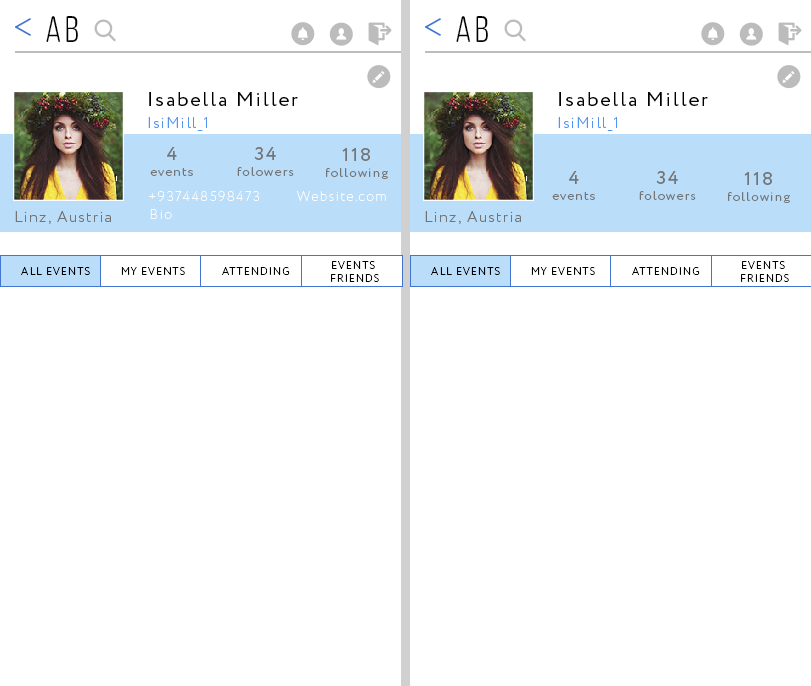
<style>
.page{position:relative;width:811px;height:686px;background:#ffffff}
.page>*{position:absolute;margin:0}
.t1{font:37px "ClutchSans-Regular";letter-spacing:0.1em;color:#000000}
.t2{font:20px "Circe-Regular";letter-spacing:0.1em;color:#000000}
.t3{font:15px "Circe-Light";letter-spacing:0.1em;color:#5495f2}
.t4{font:13px "Circe-Light";letter-spacing:0.1em;color:#747474}
.t5{font:18.6px "Circe-Regular";letter-spacing:0.1em;color:#747474}
.t6{font:13.7px "Circe-ExtraLight";letter-spacing:0.1em;color:#fefefe}
.t7{font:15px "Circe-Light";letter-spacing:0.1em;color:#747474}
.t8{font:10.3px "Circe-Light";letter-spacing:0.1em;color:#000000}
</style>
<div class="page">
<p class="t1" style="left:46px;top:16px;width:32px;height:26px">Ab</p>
<p class="t1" style="left:456px;top:16px;width:32px;height:26px">Ab</p>
<p class="t2" style="left:149px;top:92px;width:149px;height:14px">Isabella Miller</p>
<p class="t2" style="left:559px;top:92px;width:149px;height:14px">Isabella Miller</p>
<p class="t3" style="left:148px;top:117px;width:59px;height:14px">IsiMill_1</p>
<p class="t3" style="left:558px;top:117px;width:59px;height:14px">IsiMill_1</p>
<p class="t4" style="left:150px;top:147px;width:43px;height:29px;text-align:center"><span class="t5">4<br></span>events</p>
<p class="t4" style="left:237px;top:147px;width:57px;height:29px;text-align:center"><span class="t5">34<br></span>folowers</p>
<p class="t4" style="left:326px;top:148px;width:62px;height:31px;text-align:center"><span class="t5">118<br></span>following</p>
<p class="t4" style="left:552px;top:171px;width:43px;height:29px;text-align:center"><span class="t5">4<br></span>events</p>
<p class="t4" style="left:639px;top:171px;width:57px;height:29px;text-align:center"><span class="t5">34<br></span>folowers</p>
<p class="t4" style="left:728px;top:172px;width:62px;height:31px;text-align:center"><span class="t5">118<br></span>following</p>
<p class="t6" style="left:149px;top:191px;width:111px;height:10px">+937448598473</p>
<p class="t6" style="left:297px;top:191px;width:89px;height:10px">Website.com</p>
<p class="t6" style="left:150px;top:209px;width:22px;height:10px">Bio</p>
<p class="t7" style="left:15px;top:211px;width:96px;height:13px">Linz, Austria</p>
<p class="t7" style="left:425px;top:211px;width:96px;height:13px">Linz, Austria</p>
<p class="t8" style="left:21px;top:267px;width:69px;height:8px">ALL EVENTS</p>
<p class="t8" style="left:121px;top:267px;width:64px;height:8px">MY EVENTS</p>
<p class="t8" style="left:222px;top:267px;width:68px;height:8px">ATTENDING</p>
<p class="t8" style="left:331px;top:261px;width:48px;height:21px;text-align:center">EVENTS <br>FRIENDS</p>
<p class="t8" style="left:431px;top:267px;width:69px;height:8px">ALL EVENTS</p>
<p class="t8" style="left:531px;top:267px;width:64px;height:8px">MY EVENTS</p>
<p class="t8" style="left:632px;top:267px;width:68px;height:8px">ATTENDING</p>
<p class="t8" style="left:741px;top:261px;width:48px;height:21px;text-align:center">EVENTS <br>FRIENDS</p>
</div>
